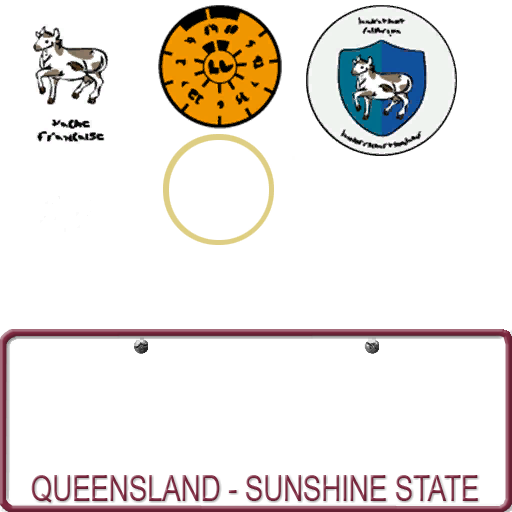
<style>
.page{position:relative;width:512px;height:512px;background:#ffffff}
.page>*{position:absolute;margin:0}
.t1{font:35.7px "ArialMT";scale:0.77 1}
</style>
<div class="page">
<p class="t1" style="left:31px;top:475px;width:447px;height:28px">QUEENSLAND - SUNSHINE STATE</p>
</div>
